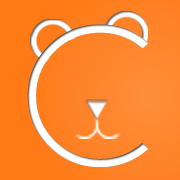
<style>
.page{position:relative;width:180px;height:180px}
.page>*{position:absolute;margin:0}
.t1{font:201.5px "Champagne&Limousines";color:#ffffff}
</style>
<div class="page">
<p class="t1" style="left:27px;top:24px;width:122px;height:143px">C</p>
</div>
